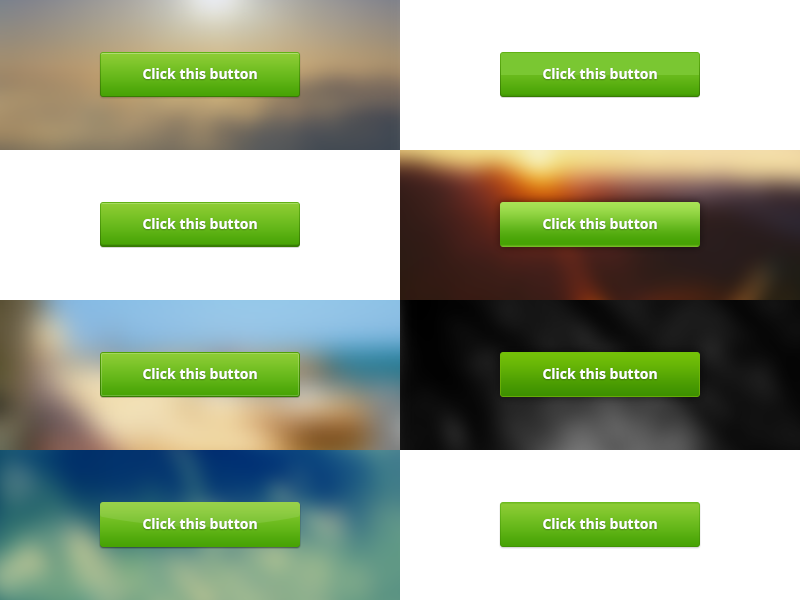
<style>
.page{position:relative;width:800px;height:600px;background:#ffffff}
.page>*{position:absolute;margin:0}
.t1{font:14px "OpenSans-Bold";color:#ffffff}
</style>
<div class="page">
<p class="t1" style="left:143px;top:68px;width:114px;height:11px">Click this button</p>
<p class="t1" style="left:543px;top:68px;width:114px;height:11px">Click this button</p>
<p class="t1" style="left:143px;top:218px;width:114px;height:11px">Click this button</p>
<p class="t1" style="left:543px;top:218px;width:114px;height:11px">Click this button</p>
<p class="t1" style="left:143px;top:368px;width:114px;height:11px">Click this button</p>
<p class="t1" style="left:543px;top:368px;width:114px;height:11px">Click this button</p>
<p class="t1" style="left:143px;top:518px;width:114px;height:11px">Click this button</p>
<p class="t1" style="left:543px;top:518px;width:114px;height:11px">Click this button</p>
</div>
